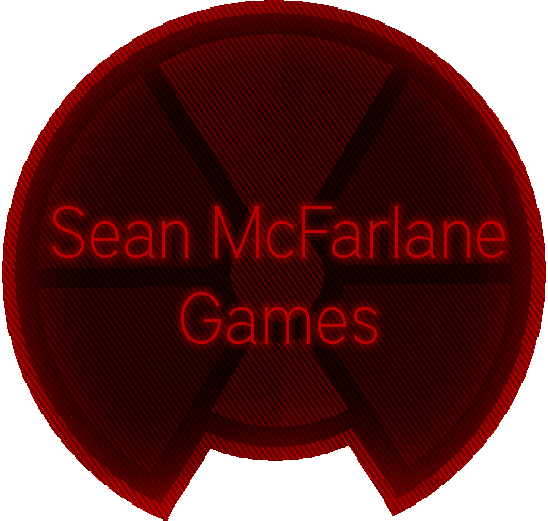
<style>
.page{position:relative;width:548px;height:521px;background:#ffffff}
.page>*{position:absolute;margin:0}
.t1{font:72px "DistrictPro-Thin";color:#bc0000}
</style>
<div class="page">
<p class="t1" style="left:52px;top:206px;width:453px;height:138px;text-align:center">Sean McFarlane<br>Games</p>
</div>
